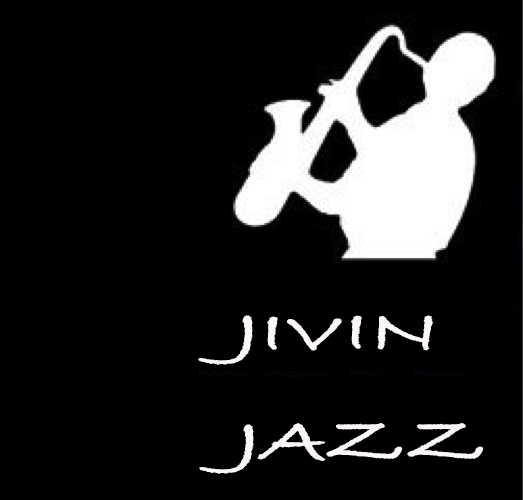
<style>
.page{position:relative;width:523px;height:500px;background:#000000}
.page>*{position:absolute;margin:0}
.t1{font:62.3px "BradleyHandITCTT-Bold";color:#fbf7f6;scale:1.44 1}
</style>
<div class="page">
<p class="t1" style="left:198px;top:315px;width:286px;height:159px">JIVIN<br>JAZZ</p>
</div>
